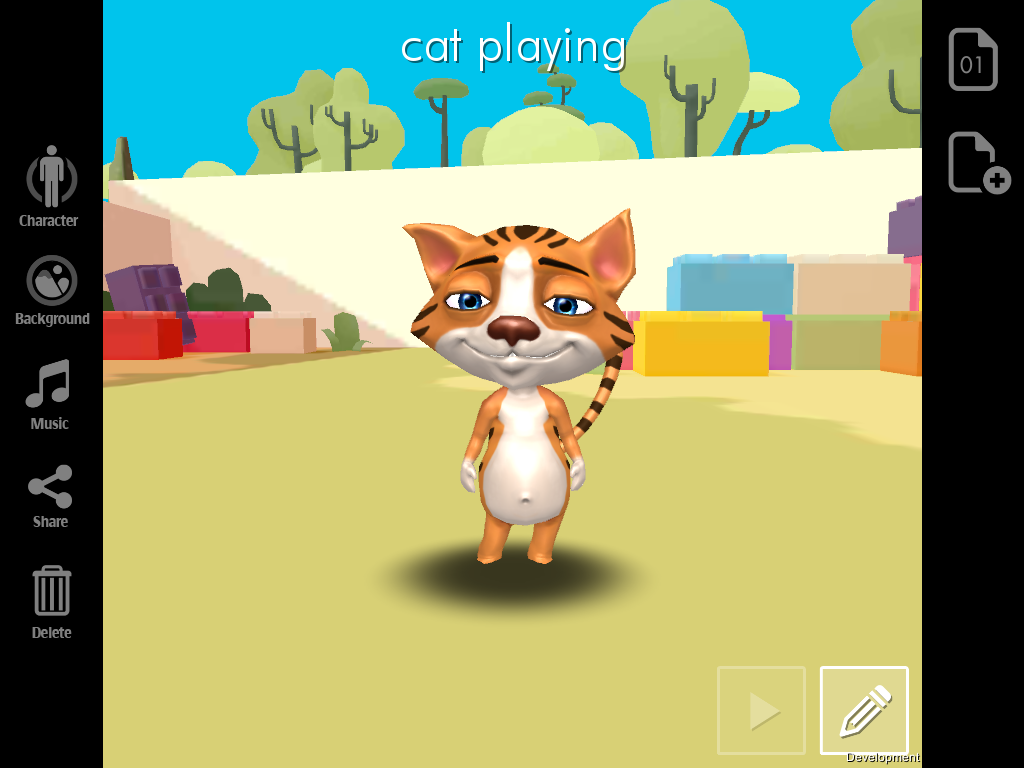
<style>
.page{position:relative;width:1024px;height:768px;background:#d8d075}
.page>*{position:absolute;margin:0}
.t1{font:16px "CommunistSansBold";letter-spacing:-0.08em;color:#7f7f7f;scale:0.89 1}
</style>
<div class="page">
<p class="t1" style="left:19px;top:215px;width:60px;height:11px">Character</p>
<p class="t1" style="left:15px;top:313px;width:75px;height:14px">Background</p>
<p class="t1" style="left:31px;top:417px;width:38px;height:12px">Music</p>
<p class="t1" style="left:33px;top:516px;width:35px;height:11px">Share</p>
<p class="t1" style="left:32px;top:627px;width:40px;height:11px">Delete</p>
</div>
